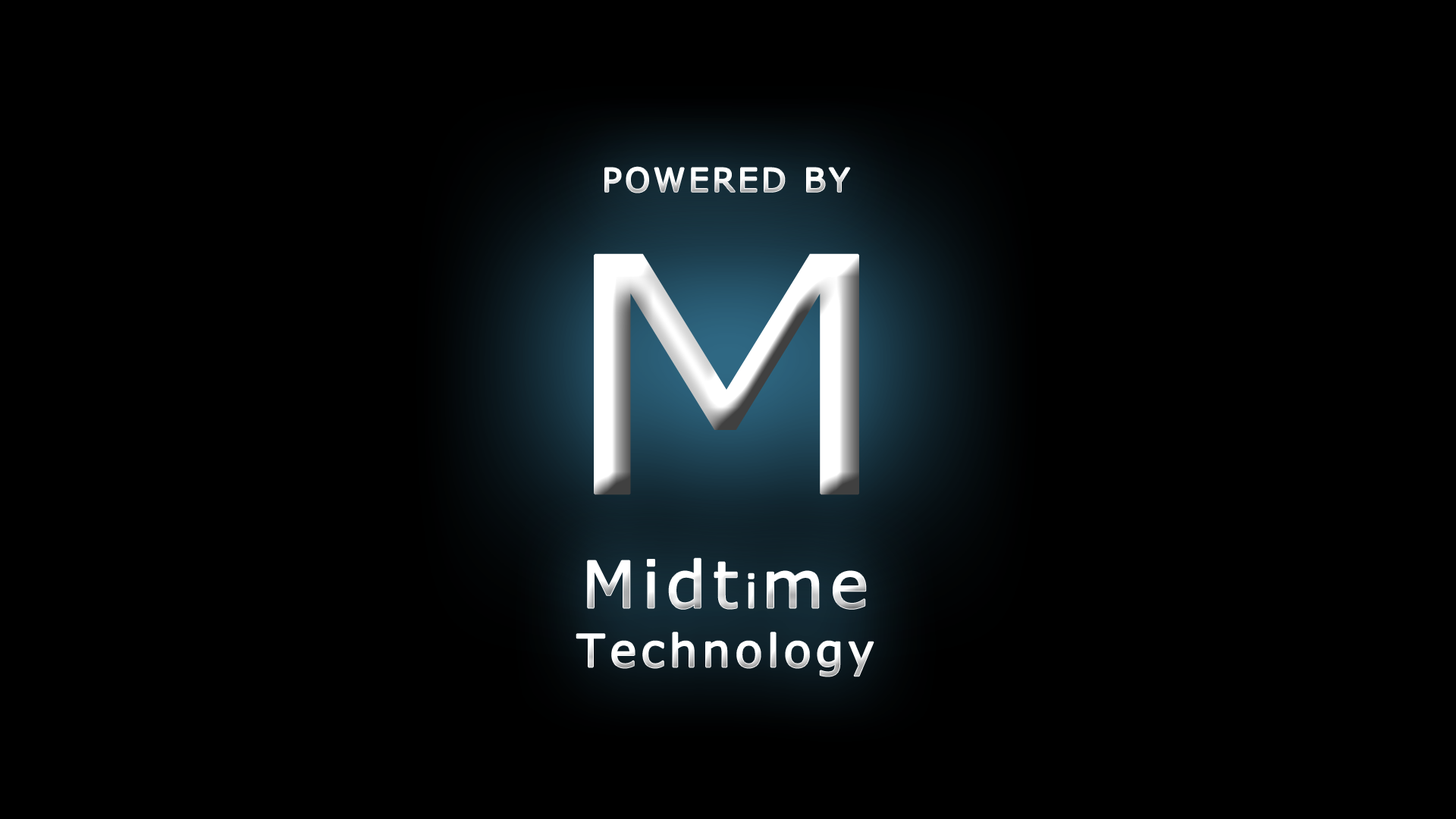
<style>
.page{position:relative;width:1456px;height:819px;background:#000000}
.page>*{position:absolute;margin:0}
.t1{font:31.6px "Meiryo";letter-spacing:0.1em;color:#ffffff;font-weight:bold}
.t2{font:323.6px "Meiryo";letter-spacing:0.1em;font-weight:bold;scale:1.25 1}
.t3{font:44.2px/75.8px "Meiryo";letter-spacing:0.1em;font-weight:bold}
.t4{font:63.2px/75.8px "Meiryo";letter-spacing:0.1em;font-weight:bold}
</style>
<div class="page">
<p class="t1" style="left:605px;top:167px;width:245px;height:26px">POWERED BY</p>
<p class="t2" style="left:594px;top:253px;width:265px;height:242px">M</p>
<p class="t3" style="left:576px;top:558px;width:298px;height:118px;text-align:center"><span class="t4">Midt</span>i<span class="t4">me<br></span>Technology</p>
</div>
